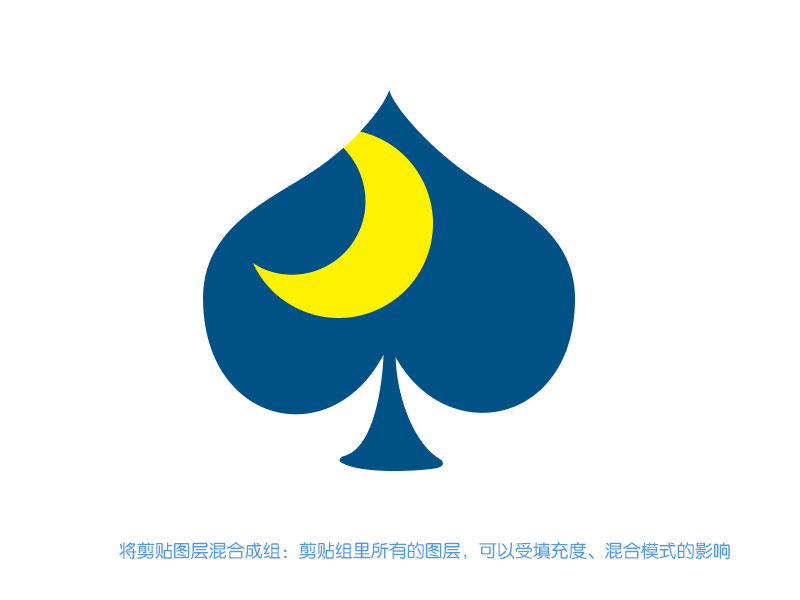
<style>
.page{position:relative;width:800px;height:600px;background:#ffffff}
.page>*{position:absolute;margin:0}
.t1{font:18px "FZY3JW--GB1-0";color:#489bf0}
</style>
<div class="page">
<p class="t1" style="left:119px;top:542px;width:611px;height:18px">将剪贴图层混合成组：剪贴组里所有的图层，可以受填充度、混合模式的影响</p>
</div>
